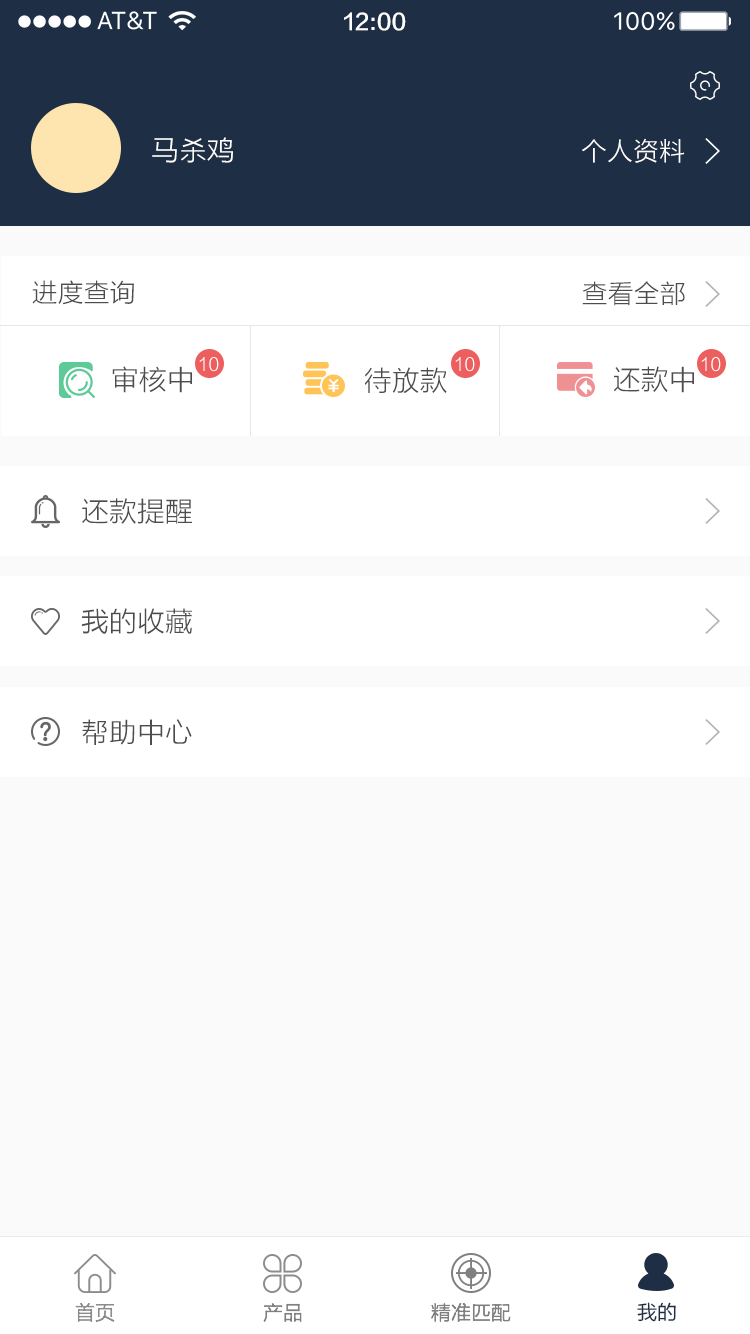
<style>
.page{position:relative;width:750px;height:1334px;background:#fafafa}
.page>*{position:absolute;margin:0}
.t1{font:22px "FZLTZHK--GBK1-0";color:#ffffff}
.t2{font:28px "FZLTXHK";color:#ffffff}
.t3{font:26px "FZLTXHK";color:#ffffff}
.t4{font:26px "FZLTXHK";color:#4d4d4d}
.t5{font:28px "FZLTXHK";color:#4d4d4d}
.t6{font:18px "FZLTXHK";color:#ffffff}
.t7{font:20px "FZLTXHK";color:#8c8c8c}
.t8{font:20px "FZLTHK--GBK1-0";color:#1e2e45}
.t9{font:20px "FZLTXHK";color:#808080}
</style>
<div class="page">
<p class="t1" style="left:344px;top:12px;width:62px;height:19px">12:00</p>
<p class="t2" style="left:152px;top:137px;width:81px;height:26px">马杀鸡</p>
<p class="t3" style="left:582px;top:138px;width:103px;height:25px">个人资料</p>
<p class="t4" style="left:32px;top:280px;width:102px;height:25px">进度查询</p>
<p class="t4" style="left:582px;top:281px;width:103px;height:25px">查看全部</p>
<p class="t5" style="left:112px;top:366px;width:80px;height:27px">审核中</p>
<p class="t6" style="left:199px;top:357px;width:20px;height:15px">10</p>
<p class="t6" style="left:455px;top:357px;width:20px;height:15px">10</p>
<p class="t5" style="left:614px;top:366px;width:80px;height:27px">还款中</p>
<p class="t6" style="left:701px;top:357px;width:20px;height:15px">10</p>
<p class="t5" style="left:364px;top:367px;width:83px;height:27px">待放款</p>
<p class="t5" style="left:82px;top:498px;width:110px;height:26px">还款提醒</p>
<p class="t5" style="left:81px;top:608px;width:111px;height:26px">我的收藏</p>
<p class="t5" style="left:82px;top:719px;width:110px;height:26px">帮助中心</p>
<p class="t7" style="left:75px;top:1302px;width:40px;height:20px">首页</p>
<p class="t8" style="left:637px;top:1302px;width:39px;height:20px">我的</p>
<p class="t9" style="left:263px;top:1303px;width:39px;height:19px">产品</p>
<p class="t9" style="left:431px;top:1303px;width:80px;height:19px">精准匹配</p>
</div>
